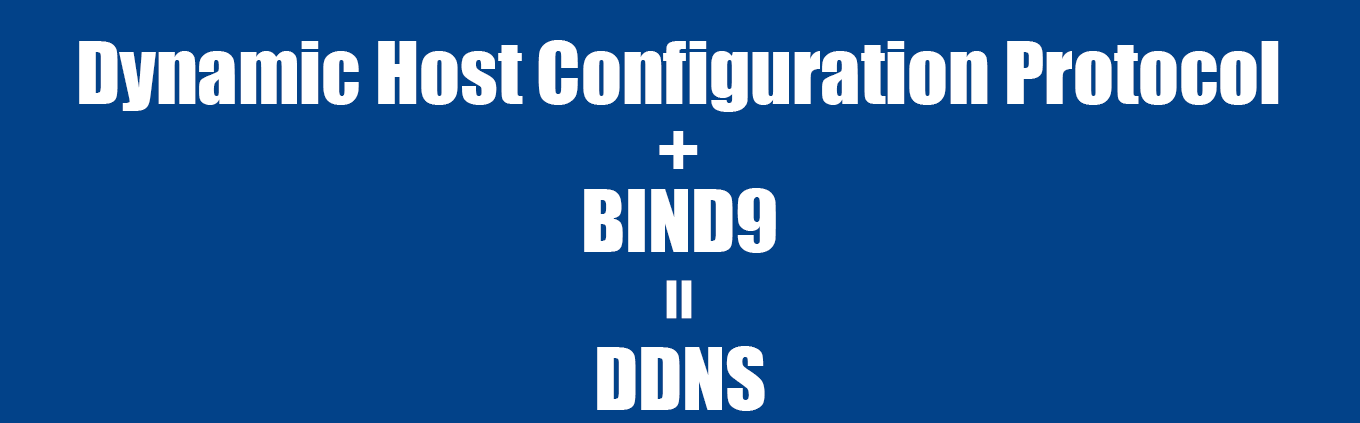
<style>
.page{position:relative;width:1360px;height:423px;background:#024289}
.page>*{position:absolute;margin:0}
.t1{font:80px "Impact";color:#ffffff}
</style>
<div class="page">
<p class="t1" style="left:79px;top:40px;width:1200px;height:72px">Dynamic Host Configuration Protocol</p>
<p class="t1" style="left:659px;top:131px;width:39px;height:38px">+</p>
<p class="t1" style="left:584px;top:188px;width:192px;height:65px">BIND9</p>
<p class="t1" style="left:666px;top:280px;width:26px;height:39px;rotate:90deg">=</p>
<p class="t1" style="left:597px;top:346px;width:168px;height:65px">DDNS</p>
</div>
